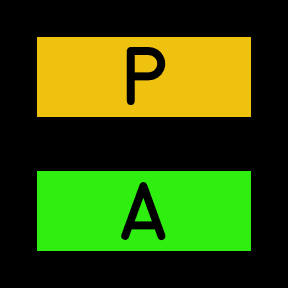
<style>
.page{position:relative;width:288px;height:288px;background:#000000}
.page>*{position:absolute;margin:0}
.t1{font:58px "MS-33558";letter-spacing:-0.04em;color:#000000}
</style>
<div class="page">
<p class="t1" style="left:126px;top:47px;width:41px;height:58px">P</p>
<p class="t1" style="left:120px;top:181px;width:47px;height:60px">A</p>
</div>
